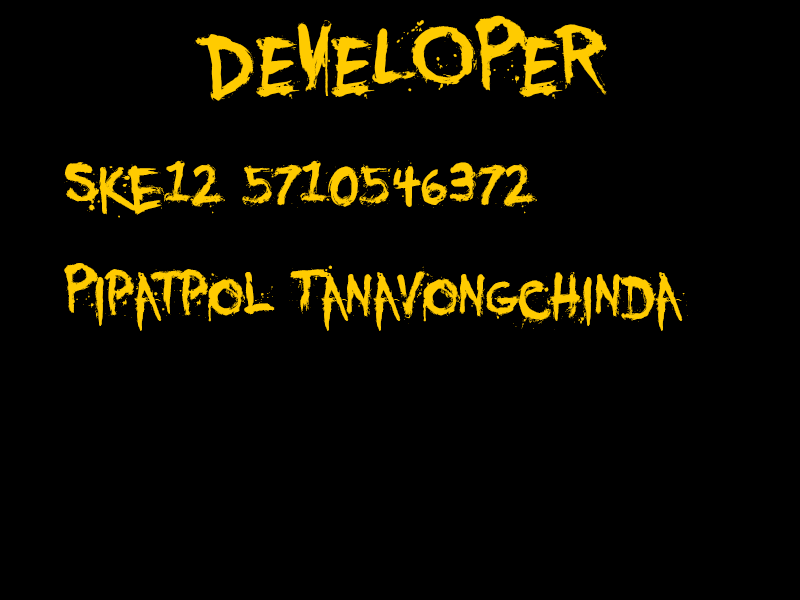
<style>
.page{position:relative;width:800px;height:600px;background:#000000}
.page>*{position:absolute;margin:0}
.t1{font:133.3px "YouMurdererBB";color:#ffcb00}
.t2{font:88.9px "YouMurdererBB";color:#ffcb00}
</style>
<div class="page">
<p class="t1" style="left:194px;top:15px;width:413px;height:86px">DEVELOPER</p>
<p class="t2" style="left:64px;top:160px;width:624px;height:171px">ske12 5710546372<br>Pipatpol Tanavongchinda</p>
</div>
